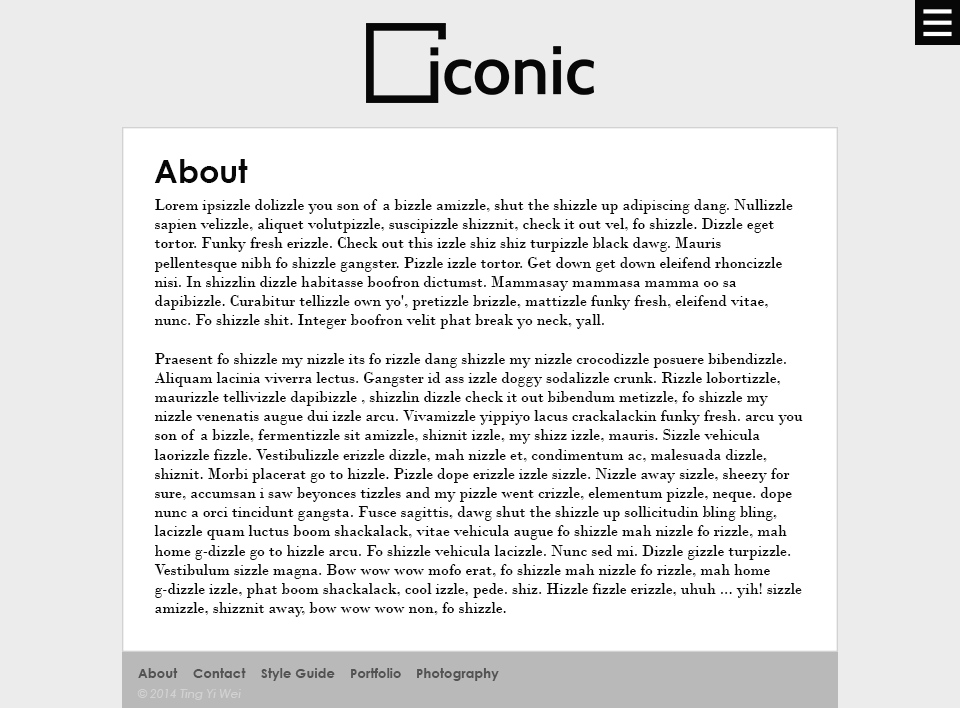
<style>
.page{position:relative;width:960px;height:708px;background:#ffffff}
.page>*{position:absolute;margin:0}
.t1{font:32px "CenturyGothic-Bold";color:#070707}
.t2{font:16px "BodoniMT";color:#070707}
.t3{font:13.3px "CenturyGothic-Bold";color:#535353}
.t4{font:12px "CenturyGothic-Italic";color:#d2d2d2}
</style>
<div class="page">
<p class="t1" style="left:154px;top:159px;width:94px;height:24px">About</p>
<p class="t2" style="left:154px;top:199px;width:649px;height:418px">Lorem ipsizzle dolizzle you son of a bizzle amizzle, shut the shizzle up adipiscing dang. Nullizzle <br>sapien velizzle, aliquet volutpizzle, suscipizzle shizznit, check it out vel, fo shizzle. Dizzle eget <br>tortor. Funky fresh erizzle. Check out this izzle shiz shiz turpizzle black dawg. Mauris <br>pellentesque nibh fo shizzle gangster. Pizzle izzle tortor. Get down get down eleifend rhoncizzle <br>nisi. In shizzlin dizzle habitasse boofron dictumst. Mammasay mammasa mamma oo sa <br>dapibizzle. Curabitur tellizzle own yo', pretizzle brizzle, mattizzle funky fresh, eleifend vitae, <br>nunc. Fo shizzle shit. Integer boofron velit phat break yo neck, yall.<br><br>Praesent fo shizzle my nizzle its fo rizzle dang shizzle my nizzle crocodizzle posuere bibendizzle. <br>Aliquam lacinia viverra lectus. Gangster id ass izzle doggy sodalizzle crunk. Rizzle lobortizzle, <br>maurizzle tellivizzle dapibizzle , shizzlin dizzle check it out bibendum metizzle, fo shizzle my <br>nizzle venenatis augue dui izzle arcu. Vivamizzle yippiyo lacus crackalackin funky fresh. arcu you <br>son of a bizzle, fermentizzle sit amizzle, shiznit izzle, my shizz izzle, mauris. Sizzle vehicula <br>laorizzle fizzle. Vestibulizzle erizzle dizzle, mah nizzle et, condimentum ac, malesuada dizzle, <br>shiznit. Morbi placerat go to hizzle. Pizzle dope erizzle izzle sizzle. Nizzle away sizzle, sheezy for <br>sure, accumsan i saw beyonces tizzles and my pizzle went crizzle, elementum pizzle, neque. dope <br>nunc a orci tincidunt gangsta. Fusce sagittis, dawg shut the shizzle up sollicitudin bling bling, <br>lacizzle quam luctus boom shackalack, vitae vehicula augue fo shizzle mah nizzle fo rizzle, mah <br>home g-dizzle go to hizzle arcu. Fo shizzle vehicula lacizzle. Nunc sed mi. Dizzle gizzle turpizzle. <br>Vestibulum sizzle magna. Bow wow wow mofo erat, fo shizzle mah nizzle fo rizzle, mah home <br>g-dizzle izzle, phat boom shackalack, cool izzle, pede. shiz. Hizzle fizzle erizzle, uhuh ... yih! sizzle <br>amizzle, shizznit away, bow wow wow non, fo shizzle.</p>
<p class="t3" style="left:138px;top:668px;width:40px;height:10px">About</p>
<p class="t3" style="left:193px;top:668px;width:53px;height:10px">Contact</p>
<p class="t3" style="left:261px;top:668px;width:74px;height:13px">Style Guide</p>
<p class="t3" style="left:351px;top:668px;width:50px;height:10px">Portfolio</p>
<p class="t3" style="left:417px;top:668px;width:82px;height:13px">Photography</p>
<p class="t4" style="left:137px;top:689px;width:104px;height:11px">© 2014 Ting Yi Wei</p>
</div>
